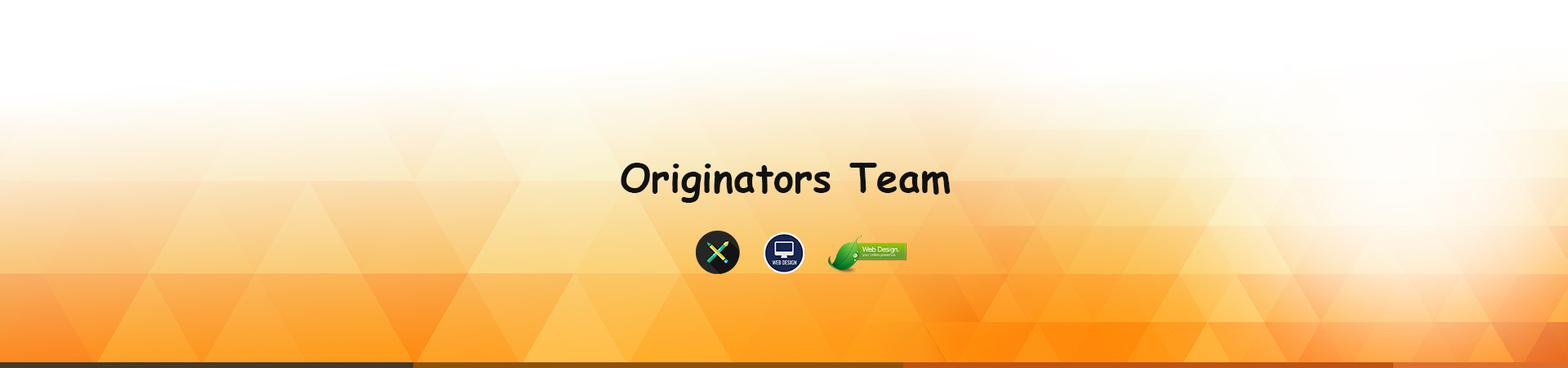
<style>
.page{position:relative;width:1568px;height:368px}
.page>*{position:absolute;margin:0}
.t1{font:39.2px "ComicSansMS-Bold";color:#111111}
</style>
<div class="page">
<p class="t1" style="left:621px;top:163px;width:330px;height:40px">Originators Team</p>
</div>
